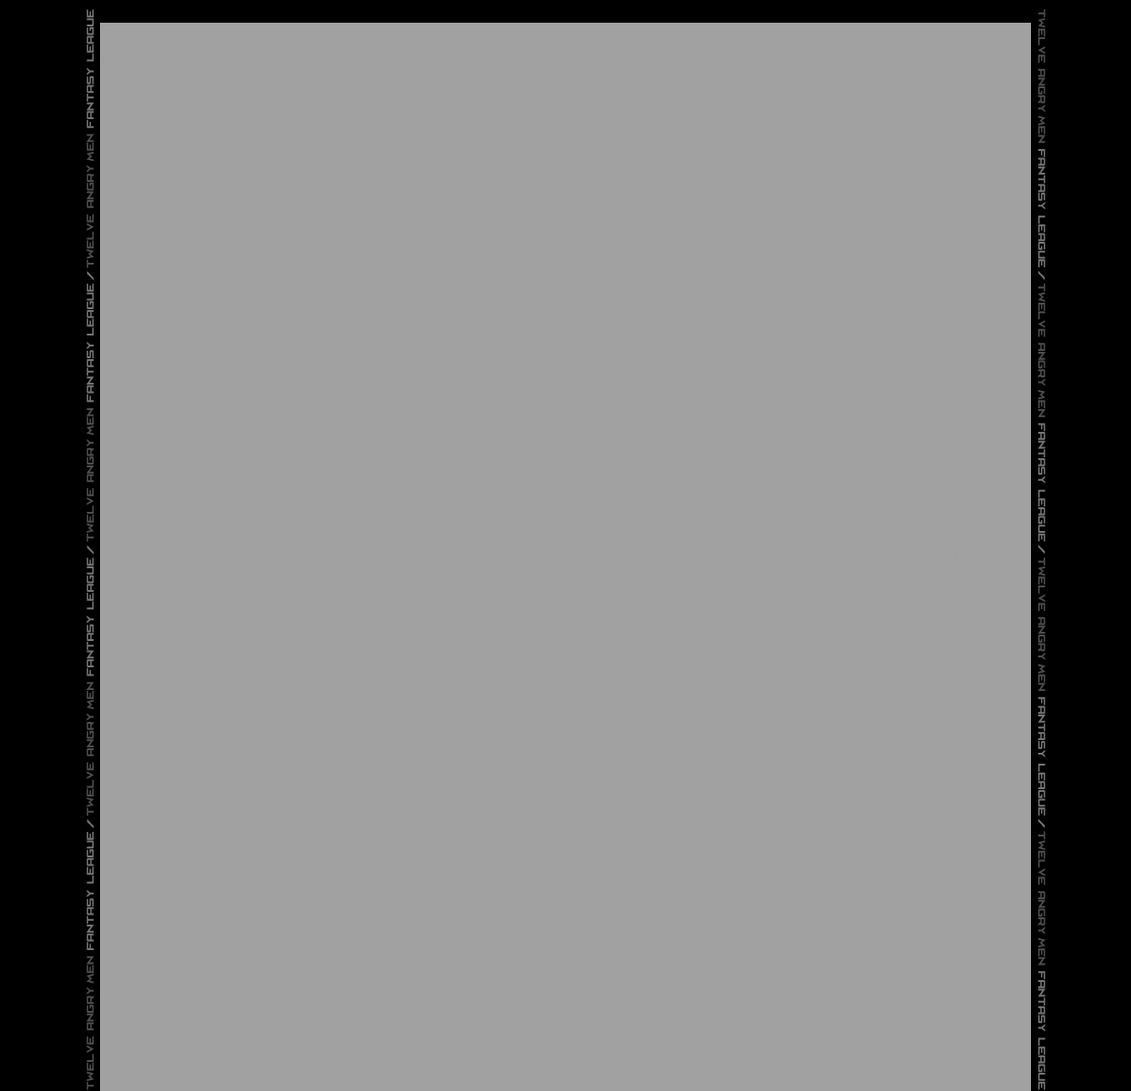
<style>
.page{position:relative;width:1131px;height:1091px;background:#a1a1a1}
.page>*{position:absolute;margin:0}
.t1{font:9px "CafeNeroM54";letter-spacing:0.025em;scale:1.11 1}
.t2{font:9px "ArialMT";letter-spacing:0.025em;scale:3.61 1}
</style>
<div class="page">
<p class="t1" style="left:86px;top:9px;width:9px;height:1081px;rotate:-90deg">TWELVE  ANGRY MEN  fantasy  LEAGUE <span class="t2">/ </span>TWELVE  ANGRY MEN  fantasy  LEAGUE <span class="t2">/ </span>TWELVE  ANGRY MEN  fantasy  LEAGUE <span class="t2">/ </span>TWELVE  ANGRY MEN  fantasy  LEAGUE</p>
</div>
